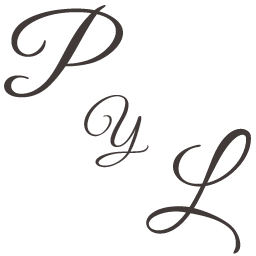
<style>
.page{position:relative;width:256px;height:256px;background:#ffffff}
.page>*{position:absolute;margin:0}
.t1{font:108.3px "GreatVibes-Regular";color:#413a38}
.t2{font:58.3px "GreatVibes-Regular";color:#413a38}
</style>
<div class="page">
<p class="t1" style="left:4px;top:5px;width:119px;height:93px">P</p>
<p class="t2" style="left:84px;top:95px;width:65px;height:73px">Y</p>
<p class="t1" style="left:146px;top:128px;width:105px;height:126px">L</p>
</div>
